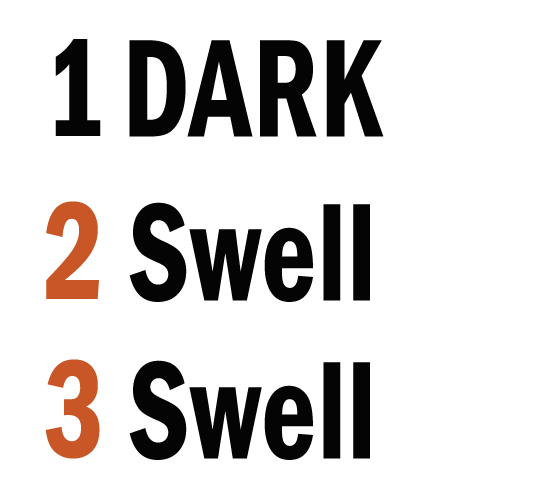
<style>
.page{position:relative;width:550px;height:500px;background:#ffffff}
.page>*{position:absolute;margin:0}
.t1{font:144px "FranklinGothic-DemiCond";letter-spacing:0.01em;color:#040404;scale:0.83 1}
.t2{font:144px "FranklinGothic-DemiCond";letter-spacing:0.01em;color:#c85626;scale:0.83 1}
</style>
<div class="page">
<p class="t1" style="left:55px;top:39px;width:46px;height:97px">1</p>
<p class="t1" style="left:129px;top:40px;width:255px;height:97px">DARK</p>
<p class="t2" style="left:46px;top:201px;width:53px;height:98px">2</p>
<p class="t1" style="left:129px;top:202px;width:241px;height:100px">Swell</p>
<p class="t2" style="left:45px;top:359px;width:55px;height:100px">3</p>
<p class="t1" style="left:129px;top:360px;width:241px;height:100px">Swell</p>
</div>
